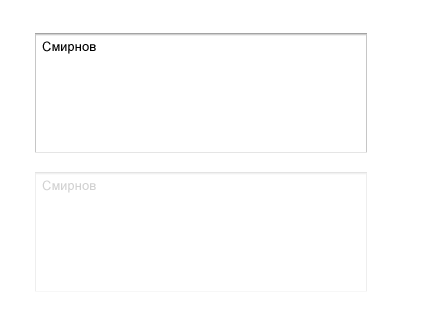
<style>
.page{position:relative;width:422px;height:330px;background:#ffffff}
.page>*{position:absolute;margin:0}
.t1{font:13px "ArialMT";color:#000000}
.t2{font:13px "ArialMT";color:#d1d1d1}
</style>
<div class="page">
<p class="t1" style="left:42px;top:41px;width:54px;height:13px">Смирнов</p>
<p class="t2" style="left:42px;top:180px;width:54px;height:13px">Смирнов</p>
</div>
